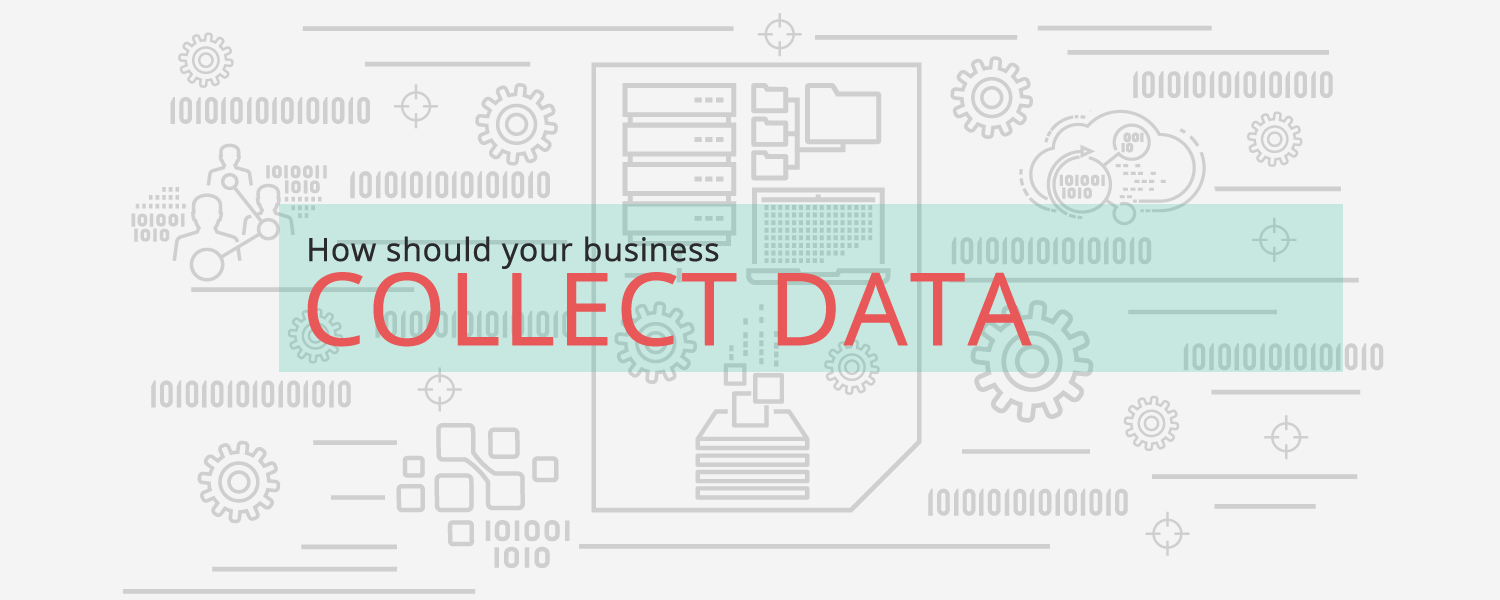
<style>
.page{position:relative;width:1500px;height:600px;background:#f4f4f4}
.page>*{position:absolute;margin:0}
.t1{font:32px "OpenSans-Regular";color:#2a2a2a;font-weight:bold}
.t2{font:100px "OpenSans-Regular";color:#e85858;font-weight:bold}
</style>
<div class="page">
<p class="t1" style="left:309px;top:236px;width:410px;height:33px">How should your business</p>
<p class="t2" style="left:307px;top:272px;width:725px;height:75px">COLLECT DATA</p>
</div>
